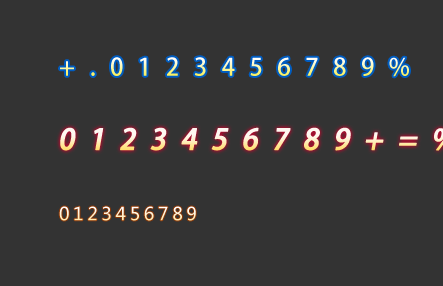
<style>
.page{position:relative;width:443px;height:286px;background:#333333}
.page>*{position:absolute;margin:0}
.t1{font:24px "AdobeHeitiStd-Regular";letter-spacing:0.6em}
.t2{font:18px "MicrosoftYaHei";letter-spacing:0.2em}
</style>
<div class="page">
<p class="t1" style="left:60px;top:57px;width:349px;height:20px">+.0123456789%</p>
<p class="t2" style="left:59px;top:206px;width:137px;height:15px">0123456789</p>
</div>
